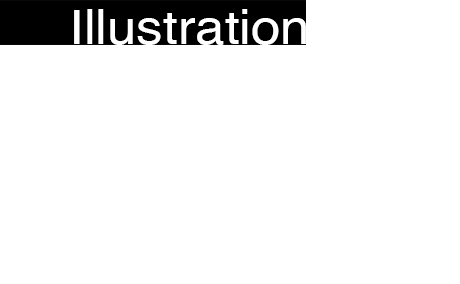
<style>
.page{position:relative;width:460px;height:284px;background:#ffffff}
.page>*{position:absolute;margin:0}
.t1{font:48px "Helvetica";color:#ffffff;scale:1.1 1}
</style>
<div class="page">
<p class="t1" style="left:74px;top:9px;width:232px;height:36px">Illustration</p>
</div>
